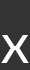
<style>
.page{position:relative;width:30px;height:70px;background:#333333}
.page>*{position:absolute;margin:0}
.t1{font:57px "Exo2-Regular";color:#ffffff}
</style>
<div class="page">
<p class="t1" style="left:1px;top:35px;width:28px;height:28px">x</p>
</div>
